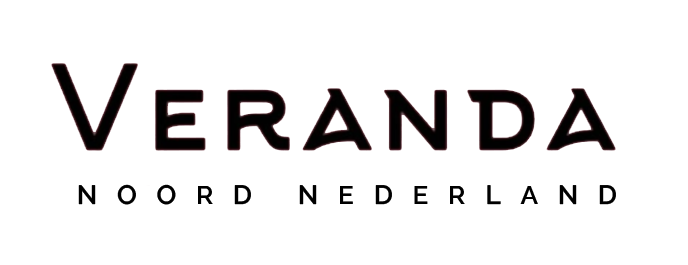
<style>
.page{position:relative;width:688px;height:265px;background:#ffffff}
.page>*{position:absolute;margin:0}
.t1{font:26.2px "RalewayRoman-SemiBold";letter-spacing:0.76em;color:#000000}
</style>
<div class="page">
<p class="t1" style="left:78px;top:184px;width:538px;height:21px">NOORD NEDERLAND</p>
</div>
